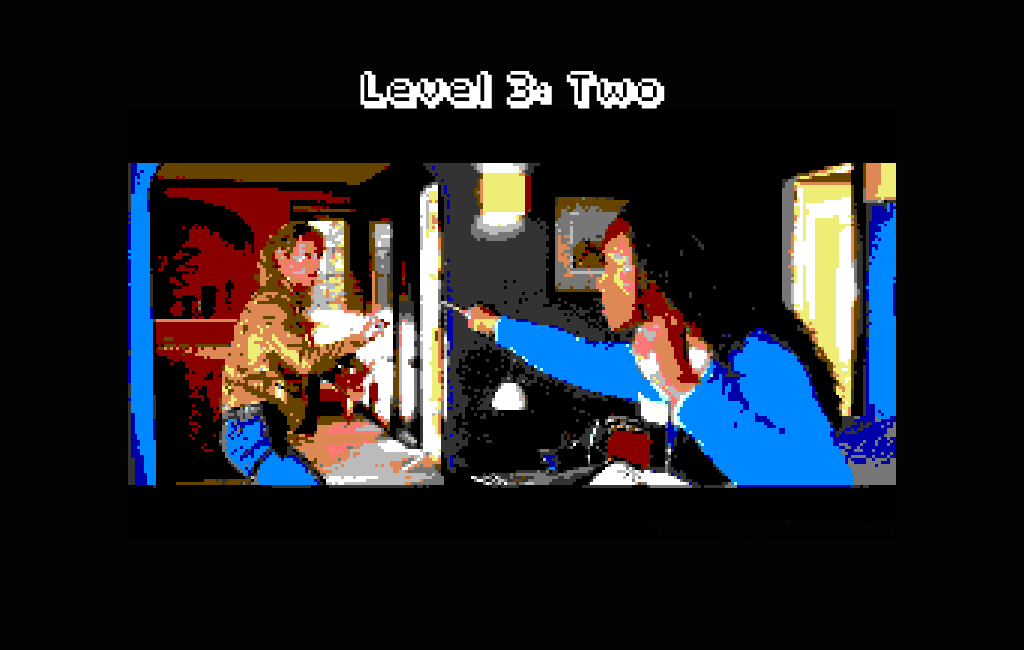
<style>
.page{position:relative;width:1024px;height:650px;background:#030303}
.page>*{position:absolute;margin:0}
.t1{font:30px "Fipps-Regular";color:#ffffff}
</style>
<div class="page">
<p class="t1" style="left:360px;top:71px;width:305px;height:38px">Level 3: Two</p>
</div>
